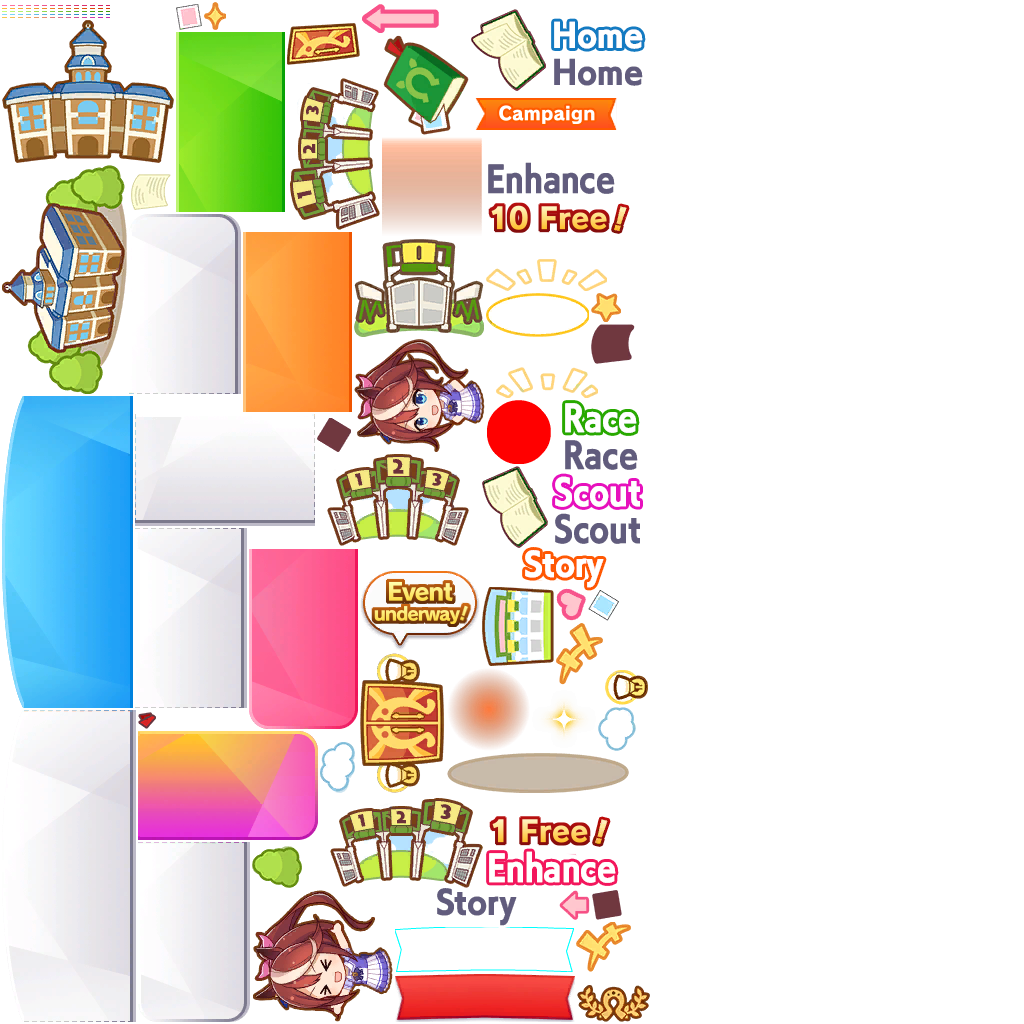
<style>
.page{position:relative;width:1024px;height:1024px;background:#ffffff}
.page>*{position:absolute;margin:0}
.t1{font:30.6px "UMAE_UDKakugo_SmallPr6-E";letter-spacing:-0.005em;color:#ffffff;font-weight:bold;scale:0.94 1}
.t2{font:30.6px "UMAE_UDKakugo_SmallPr6-E";letter-spacing:-0.005em;color:#615c7d;font-weight:bold;scale:0.94 1}
.t3{font:33.5px "UMAE_UDKakugo_SmallPr6-E";letter-spacing:-0.005em;color:#615c7d;font-weight:bold;scale:0.85 1}
.t4{font:33.5px "UMAE_UDKakugo_SmallPr6-E";letter-spacing:-0.005em;color:#ffffff;font-weight:bold;scale:0.85 1}
</style>
<div class="page">
<p class="t1" style="left:554px;top:21px;width:89px;height:28px">Home</p>
<p class="t2" style="left:554px;top:58px;width:89px;height:28px">Home</p>
<p class="t3" style="left:488px;top:162px;width:127px;height:32px">Enhance</p>
<p class="t4" style="left:565px;top:403px;width:72px;height:30px">Race</p>
<p class="t3" style="left:565px;top:440px;width:73px;height:30px">Race</p>
<p class="t4" style="left:555px;top:476px;width:85px;height:31px">Scout</p>
<p class="t3" style="left:555px;top:513px;width:85px;height:31px">Scout</p>
<p class="t1" style="left:525px;top:550px;width:79px;height:38px">Story</p>
<p class="t4" style="left:489px;top:851px;width:127px;height:32px">Enhance</p>
<p class="t2" style="left:437px;top:888px;width:80px;height:38px">Story</p>
</div>
